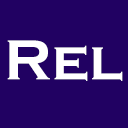
<style>
.page{position:relative;width:128px;height:128px;background:#210162}
.page>*{position:absolute;margin:0}
.t1{font:58.3px "CopperplateGothic-Bold";color:#ffffff}
</style>
<div class="page">
<p class="t1" style="left:7px;top:40px;width:116px;height:41px">Rel</p>
</div>
